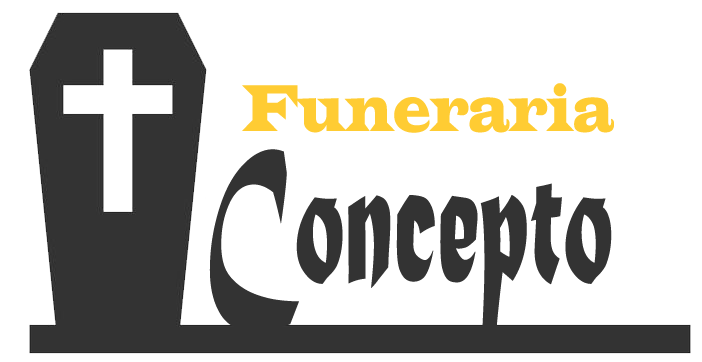
<style>
.page{position:relative;width:702px;height:362px;background:#ffffff}
.page>*{position:absolute;margin:0}
.t1{font:68.2px "LatinWide";color:#ffcc33;scale:0.62 1}
.t2{font:200px "MaturaMTScriptCapitals";color:#333333;scale:0.51 1}
</style>
<div class="page">
<p class="t1" style="left:242px;top:83px;width:372px;height:50px">Funeraria</p>
<p class="t2" style="left:209px;top:149px;width:403px;height:183px">Concepto</p>
</div>
